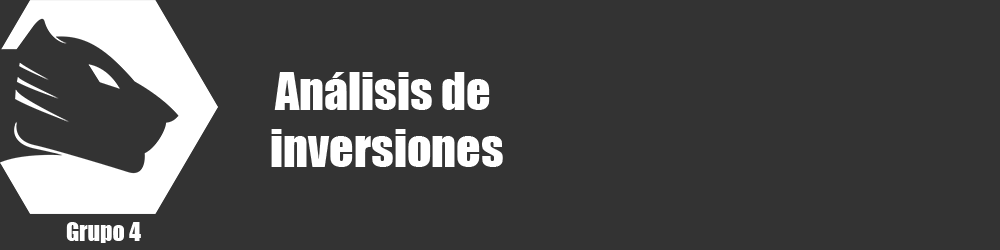
<style>
.page{position:relative;width:1000px;height:250px;background:#333333}
.page>*{position:absolute;margin:0}
.t1{font:48px "Impact";color:#ffffff}
.t2{font:24px "Impact";color:#ffffff}
</style>
<div class="page">
<p class="t1" style="left:271px;top:72px;width:232px;height:95px;text-align:center">Análisis de<br> inversiones</p>
<p class="t2" style="left:66px;top:222px;width:75px;height:21px">Grupo 4</p>
</div>
